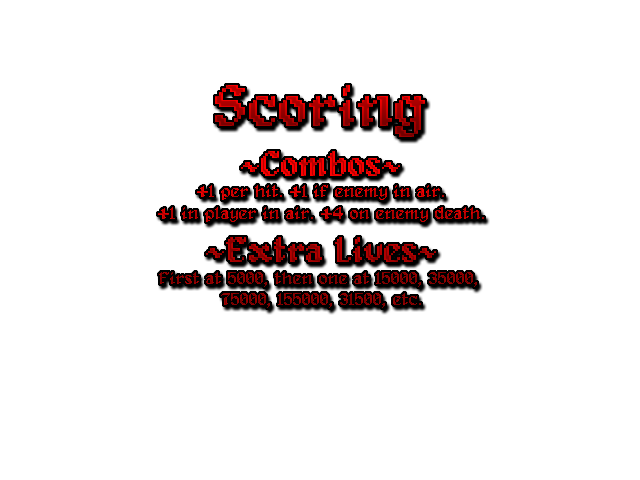
<style>
.page{position:relative;width:640px;height:480px;background:#ffffff}
.page>*{position:absolute;margin:0}
.t1{font:60px "Alagard"}
.t2{font:18px "Alagard"}
.t3{font:36px "Alagard"}
</style>
<div class="page">
<p class="t1" style="left:215px;top:85px;width:210px;height:52px">Scoring</p>
<p class="t2" style="left:158px;top:151px;width:326px;height:157px;text-align:center"><span class="t3">~Combos~<br></span>+1 per hit. +1 if enemy in air.<br>+1 in player in air. +4 on enemy death.<br><span class="t3">~Extra Lives~<br></span>First at 5000, then one at 15000, 35000, <br>75000, 155000, 31500, etc.</p>
</div>
